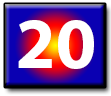
<style>
.page{position:relative;width:111px;height:96px;background:#ffffff}
.page>*{position:absolute;margin:0}
.t1{font:72px "MyriadPro-Bold";color:#ffffff}
</style>
<div class="page">
<p class="t1" style="left:18px;top:20px;width:76px;height:49px">20</p>
</div>
